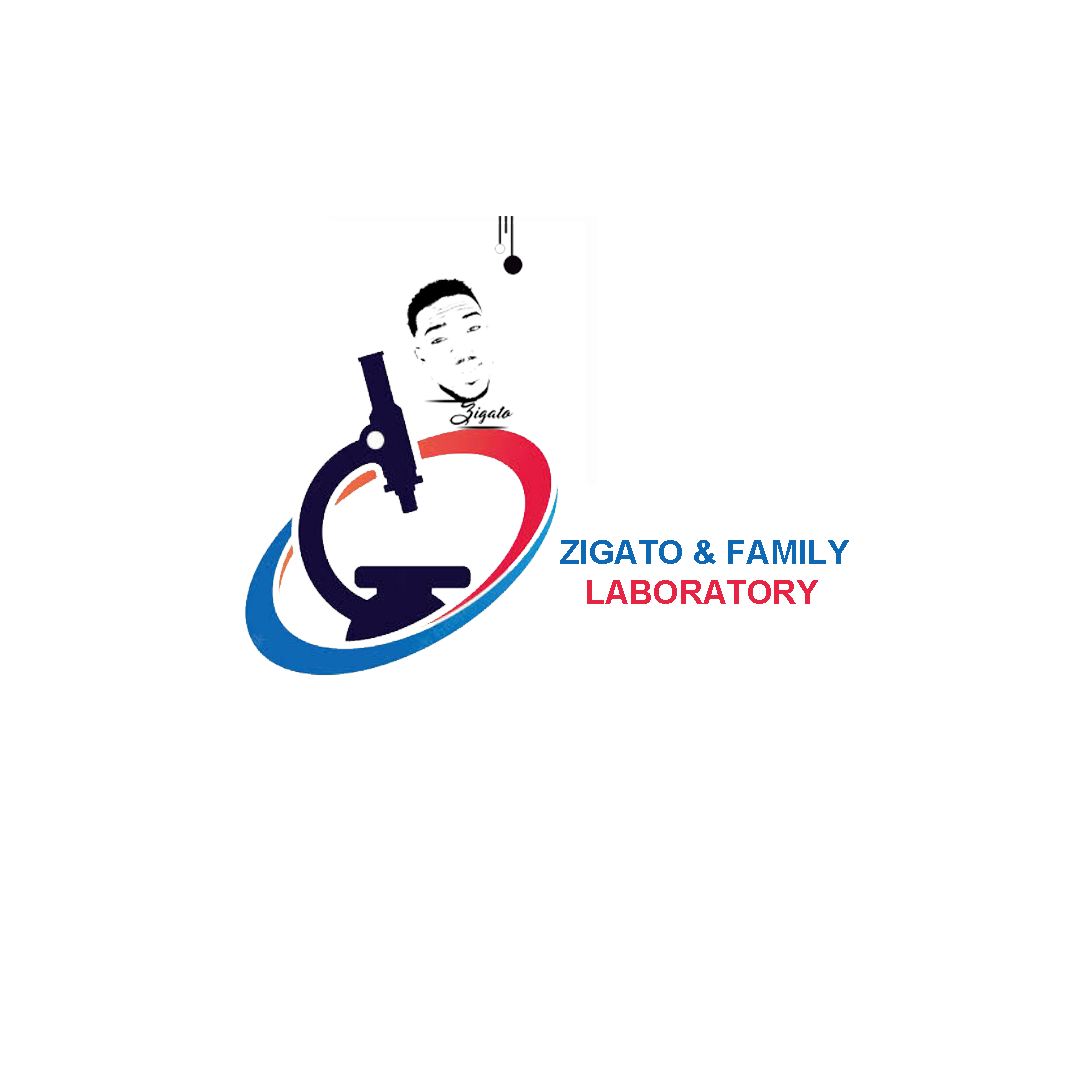
<style>
.page{position:relative;width:1080px;height:1080px;background:#ffffff}
.page>*{position:absolute;margin:0}
.t1{font:33px "Arial-BoldMT";color:#0e68b4}
.t2{font:33px "Arial-BoldMT";color:#e62544}
</style>
<div class="page">
<p class="t1" style="left:560px;top:540px;width:289px;height:64px">ZIGATO &amp; FAMILY <br><span class="t2"> LABORATORY</span></p>
</div>
